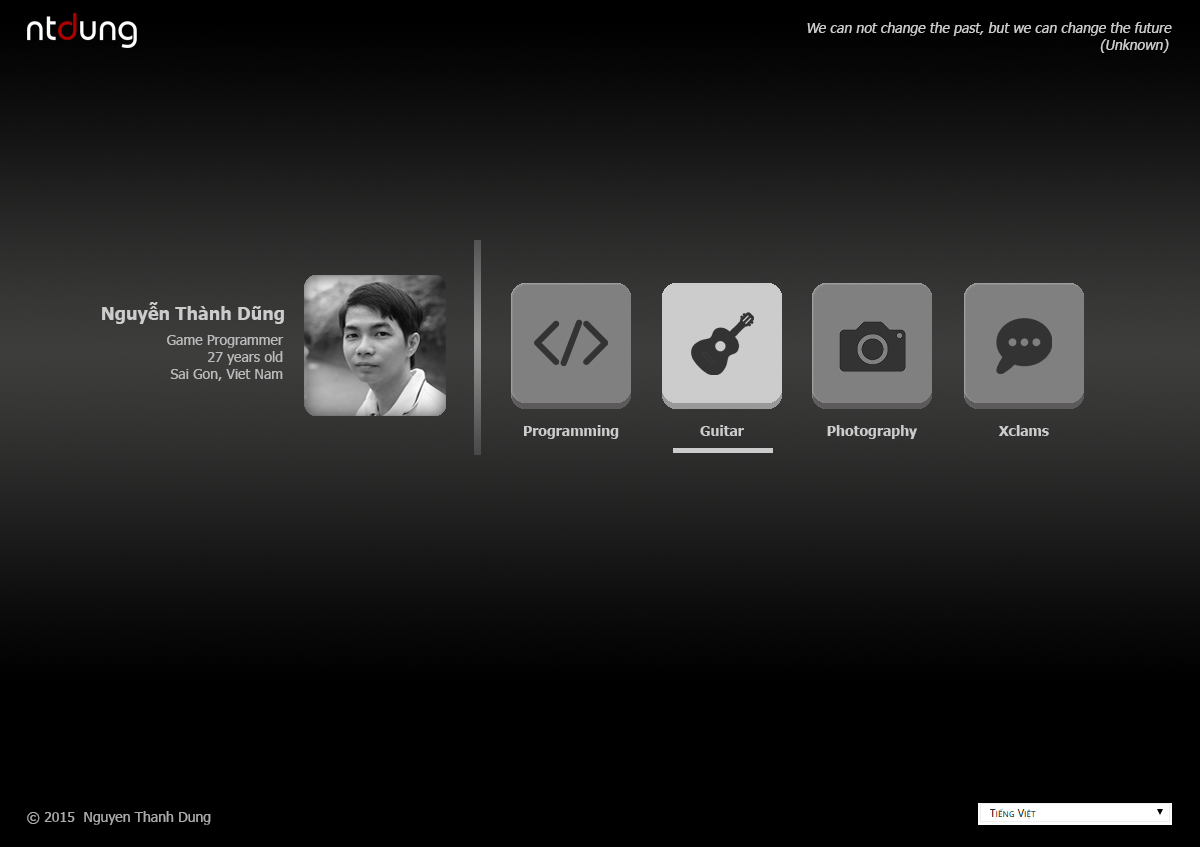
<style>
.page{position:relative;width:1200px;height:847px;background:#000000}
.page>*{position:absolute;margin:0}
.t1{font:14.2px "Tahoma";color:#cccccc}
.t2{font:18px "Tahoma-Bold";color:#cccccc}
.t3{font:14px "Tahoma";color:#bbbbbb}
.t4{font:14px "Tahoma-Bold";color:#cccccc}
.t5{font:14px "Tahoma";color:#aaaaaa}
</style>
<div class="page">
<p class="t1" style="left:807px;top:22px;width:365px;height:31px;text-align:right">We can not change the past, but we can change the future<br>(Unknown)</p>
<p class="t2" style="left:102px;top:302px;width:182px;height:22px">Nguyễn Thành Dũng</p>
<p class="t3" style="left:167px;top:335px;width:117px;height:46px;text-align:right">Game Programmer<br>27 years old<br>Sai Gon, Viet Nam</p>
<p class="t4" style="left:524px;top:425px;width:95px;height:14px">Programming</p>
<p class="t4" style="left:700px;top:425px;width:44px;height:11px">Guitar</p>
<p class="t4" style="left:827px;top:425px;width:90px;height:14px">Photography</p>
<p class="t4" style="left:999px;top:425px;width:50px;height:11px">Xclams</p>
<p class="t5" style="left:27px;top:811px;width:184px;height:14px">© 2015  Nguyen Thanh Dung</p>
</div>
